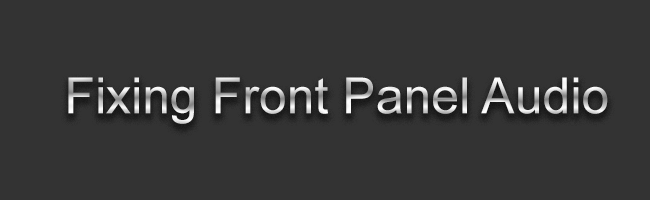
<style>
.page{position:relative;width:650px;height:200px;background:#333333}
.page>*{position:absolute;margin:0}
.t1{font:50px "ArialMT"}
</style>
<div class="page">
<p class="t1" style="left:68px;top:77px;width:540px;height:47px">Fixing Front Panel Audio</p>
</div>
